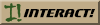
<style>
.page{position:relative;width:100px;height:25px;background:#c0ac88}
.page>*{position:absolute;margin:0}
.t1{font:17.9px "Motorwerk";color:#000000}
</style>
<div class="page">
<p class="t1" style="left:23px;top:9px;width:72px;height:9px">Interact!</p>
</div>
